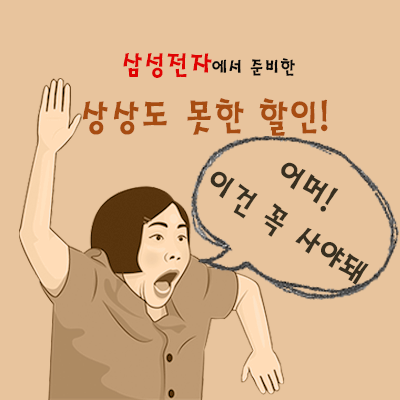
<style>
.page{position:relative;width:400px;height:400px;background:#e8c49d}
.page>*{position:absolute;margin:0}
.t1{font:20px "HaanSaleM";letter-spacing:-0.03em;color:#090909}
.t2{font:30px "HaanSaleM";letter-spacing:-0.03em;color:#e00303}
.t3{font:40px "HaanSaleM";letter-spacing:-0.03em;color:#a74c11}
.t4{font:35px/46px "HaanSaleM";letter-spacing:-0.03em;color:#362e25}
</style>
<div class="page">
<p class="t1" style="left:123px;top:53px;width:172px;height:25px"><span class="t2">삼성전자</span>에서 준비한</p>
<p class="t3" style="left:83px;top:98px;width:245px;height:38px">상상도 못한 할인!</p>
<p class="t4" style="left:210px;top:162px;width:159px;height:123px;text-align:center;rotate:32deg">어머!<br> 이건 꼭 사야돼</p>
</div>
